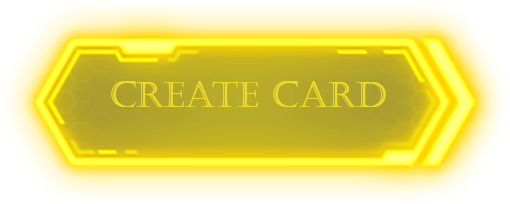
<style>
.page{position:relative;width:510px;height:204px}
.page>*{position:absolute;margin:0}
.t1{font:36px "Castellar";color:#f0dc26}
</style>
<div class="page">
<p class="t1" style="left:111px;top:81px;width:275px;height:26px">create card</p>
</div>
